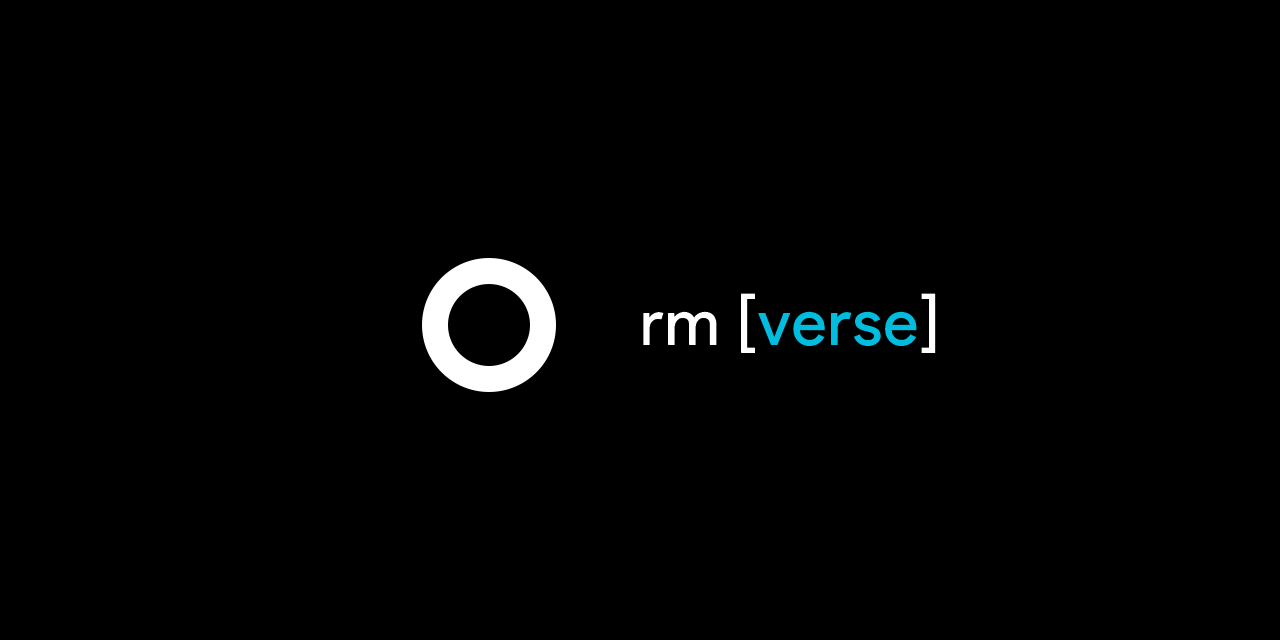
<style>
.page{position:relative;width:1280px;height:640px;background:#000000}
.page>*{position:absolute;margin:0}
.t1{font:63.9px "ProductSans-Regular";font-weight:bold}
</style>
<div class="page">
<p class="t1" style="left:643px;top:293px;width:293px;height:60px">rm [verse]</p>
</div>
